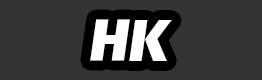
<style>
.page{position:relative;width:262px;height:80px;background:#333333}
.page>*{position:absolute;margin:0}
.t1{font:60px "FiraSans-BlackItalic";color:#ffffff}
</style>
<div class="page">
<p class="t1" style="left:90px;top:19px;width:82px;height:42px">HK</p>
</div>
